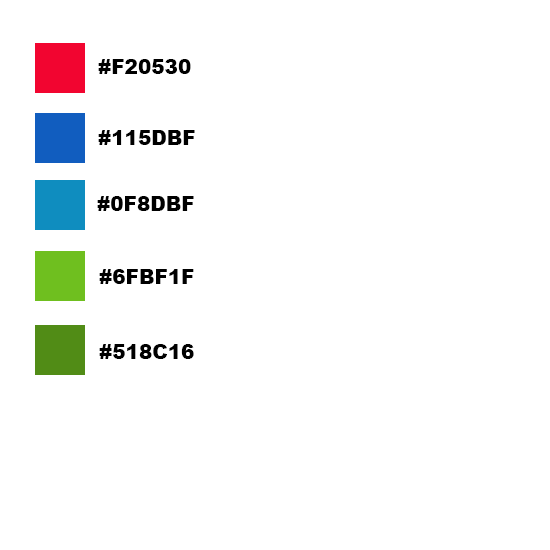
<style>
.page{position:relative;width:550px;height:550px;background:#ffffff}
.page>*{position:absolute;margin:0}
.t1{font:20px "Arial-Black";color:#000000}
</style>
<div class="page">
<p class="t1" style="left:98px;top:59px;width:93px;height:15px">#F20530</p>
<p class="t1" style="left:98px;top:130px;width:97px;height:15px">#115DBF</p>
<p class="t1" style="left:97px;top:196px;width:97px;height:15px">#0F8DBF</p>
<p class="t1" style="left:99px;top:269px;width:95px;height:15px">#6FBF1F</p>
<p class="t1" style="left:99px;top:344px;width:95px;height:15px">#518C16</p>
</div>
